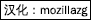
<style>
.page{position:relative;width:91px;height:20px;background:#ffffff}
.page>*{position:absolute;margin:0}
.t1{font:12px "WenQuanYiZenHeiSharp";color:#000000}
</style>
<div class="page">
<p class="t1" style="left:4px;top:4px;width:84px;height:13px">汉化：mozillazg</p>
</div>
